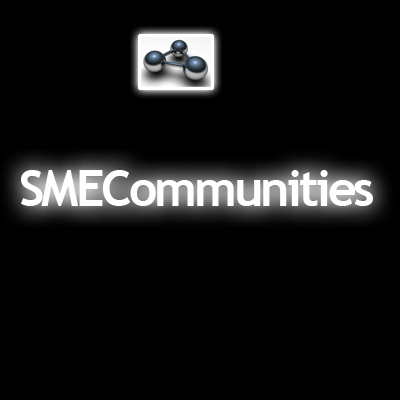
<style>
.page{position:relative;width:400px;height:400px;background:#000000}
.page>*{position:absolute;margin:0}
.t1{font:50px "TrebuchetMS-Bold";letter-spacing:-0.06em;color:#fdfcfc}
</style>
<div class="page">
<p class="t1" style="left:21px;top:170px;width:352px;height:36px">SMECommunities</p>
</div>
